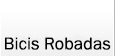
<style>
.page{position:relative;width:115px;height:56px;background:#ffffff}
.page>*{position:absolute;margin:0}
.t1{font:18px "FranklinGothic-Book";color:#000000}
</style>
<div class="page">
<p class="t1" style="left:5px;top:37px;width:106px;height:13px">Bicis Robadas</p>
</div>
